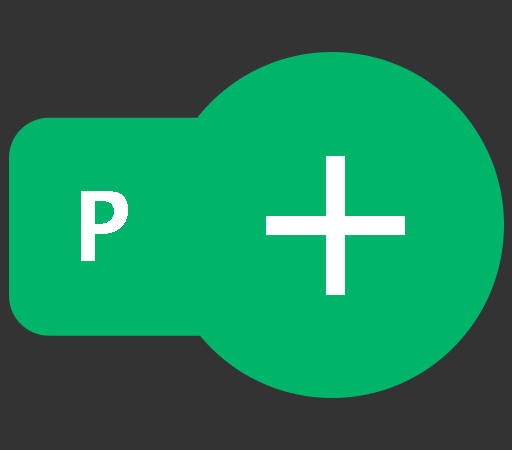
<style>
.page{position:relative;width:512px;height:450px;background:#00b46a}
.page>*{position:absolute;margin:0}
.t1{font:263px "LucidaSans";color:#ffffff}
.t2{font:96.9px "LucidaSans-Demi";color:#ffffff}
</style>
<div class="page">
<p class="t1" style="left:266px;top:156px;width:139px;height:139px">+</p>
<p class="t2" style="left:81px;top:191px;width:47px;height:70px">P</p>
</div>
